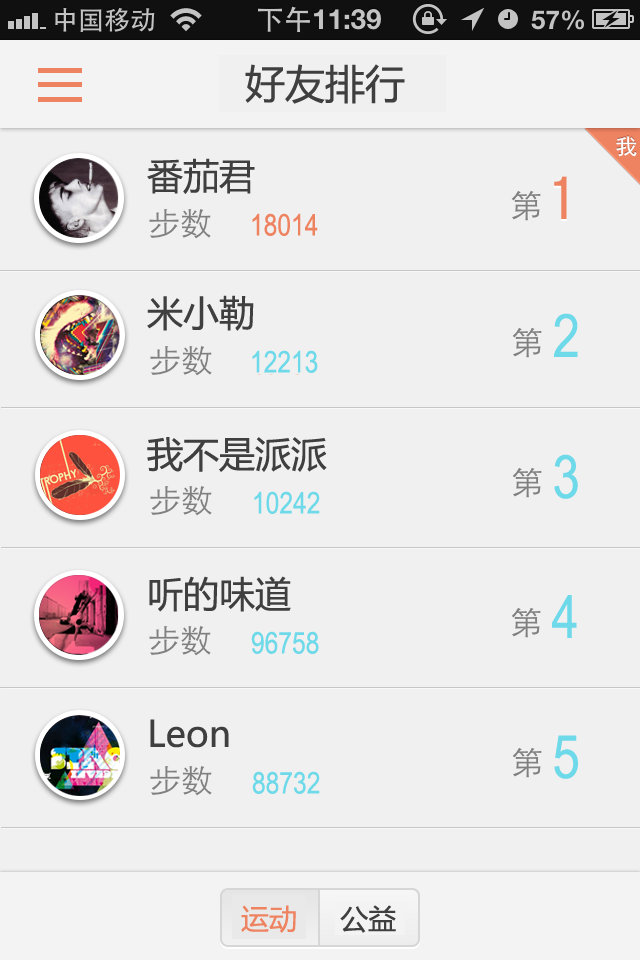
<style>
.page{position:relative;width:640px;height:960px;background:#f0f0f0}
.page>*{position:absolute;margin:0}
.t1{font:40px "MicrosoftYaHei";color:#3f3f3f}
.t2{font:36px "MicrosoftYaHei";color:#3f3f3f}
.t3{font:30px "ArialNarrow";color:#ee8361}
.t4{font:60px "ArialNarrow";color:#6ed9e9}
.t5{font:30px "ArialNarrow";color:#6ed9e9}
.t6{font:28px "MicrosoftYaHei";color:#ee8361}
.t7{font:28px "MicrosoftYaHei";color:#3f3f3f}
</style>
<div class="page">
<p class="t1" style="left:245px;top:64px;width:160px;height:40px">好友排行</p>
<p class="t2" style="left:147px;top:158px;width:108px;height:36px">番茄君</p>
<p class="t3" style="left:252px;top:213px;width:66px;height:23px">18014</p>
<p class="t2" style="left:147px;top:295px;width:107px;height:36px">米小勒</p>
<p class="t4" style="left:554px;top:313px;width:24px;height:44px">2</p>
<p class="t5" style="left:252px;top:350px;width:66px;height:23px">12213</p>
<p class="t2" style="left:147px;top:437px;width:180px;height:35px">我不是派派</p>
<p class="t4" style="left:554px;top:454px;width:24px;height:45px">3</p>
<p class="t5" style="left:254px;top:491px;width:66px;height:23px">10242</p>
<p class="t2" style="left:149px;top:576px;width:142px;height:36px">听的味道</p>
<p class="t4" style="left:552px;top:595px;width:25px;height:43px">4</p>
<p class="t5" style="left:251px;top:631px;width:68px;height:23px">96758</p>
<p class="t2" style="left:150px;top:719px;width:79px;height:29px">Leon</p>
<p class="t4" style="left:554px;top:735px;width:24px;height:44px">5</p>
<p class="t5" style="left:252px;top:771px;width:68px;height:23px">88732</p>
<p class="t6" style="left:241px;top:905px;width:55px;height:28px">运动</p>
<p class="t7" style="left:340px;top:905px;width:56px;height:28px">公益</p>
</div>
